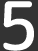
<style>
.page{position:relative;width:38px;height:51px;background:#333333}
.page>*{position:absolute;margin:0}
.t1{font:66.7px "RoundedMplus1c-Medium";color:#ffffff}
</style>
<div class="page">
<p class="t1" style="left:3px;top:1px;width:31px;height:50px">5</p>
</div>
